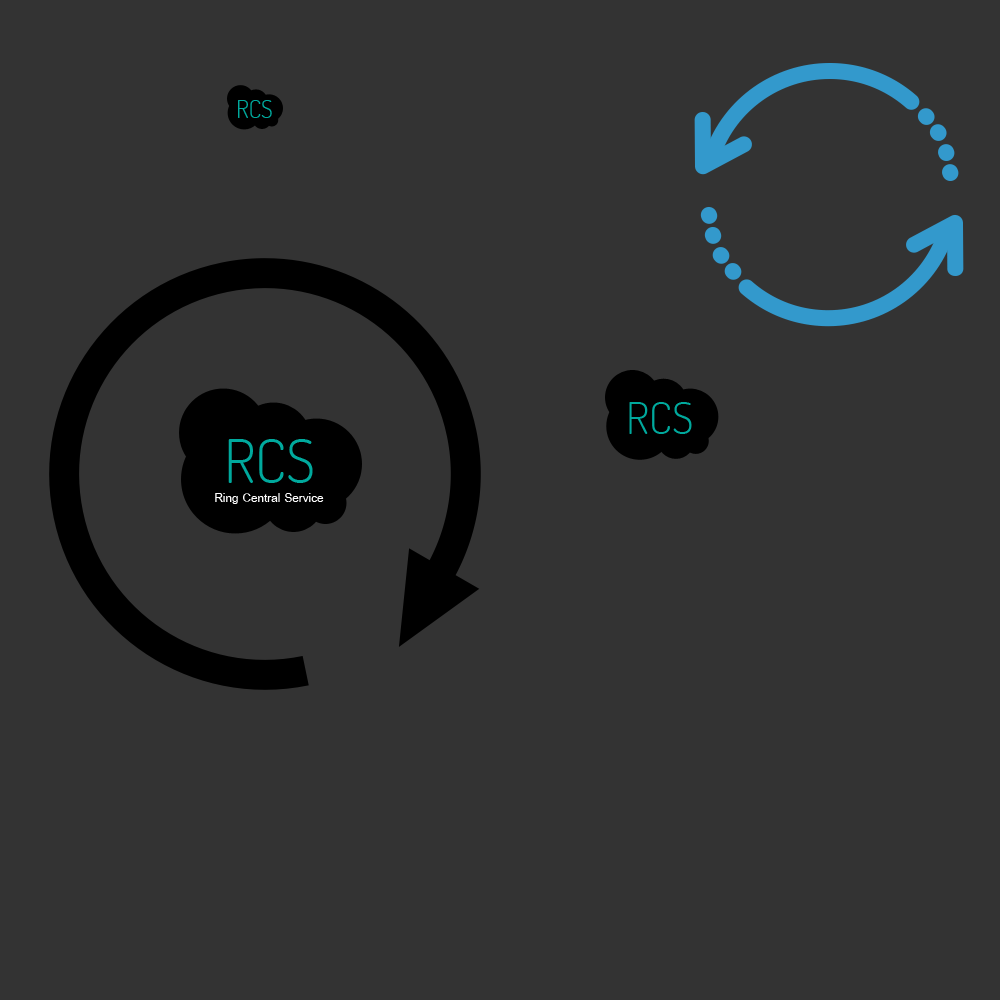
<style>
.page{position:relative;width:1000px;height:1000px;background:#333333}
.page>*{position:absolute;margin:0}
.t1{font:23.9px "Dosis-Light";color:#00a99d}
.t2{font:44.4px "Dosis-Light";color:#00a99d}
.t3{font:60px "Dosis-Light";color:#00a99d}
.t4{font:18px "BrowalliaUPC";color:#ffffff}
</style>
<div class="page">
<p class="t1" style="left:238px;top:100px;width:34px;height:18px">RCS</p>
<p class="t2" style="left:629px;top:402px;width:63px;height:32px">RCS</p>
<p class="t3" style="left:228px;top:439px;width:85px;height:44px">RCS</p>
<p class="t4" style="left:215px;top:493px;width:109px;height:11px">Ring Central Service</p>
</div>
